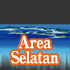
<style>
.page{position:relative;width:70px;height:70px;background:#333333}
.page>*{position:absolute;margin:0}
.t1{font:16px/15px "RyuminPro-ExBold";letter-spacing:-0.04em;color:#ffffff;scale:0.9 1}
</style>
<div class="page">
<p class="t1" style="left:11px;top:36px;width:48px;height:28px;text-align:center">Area<br>Selatan</p>
</div>
